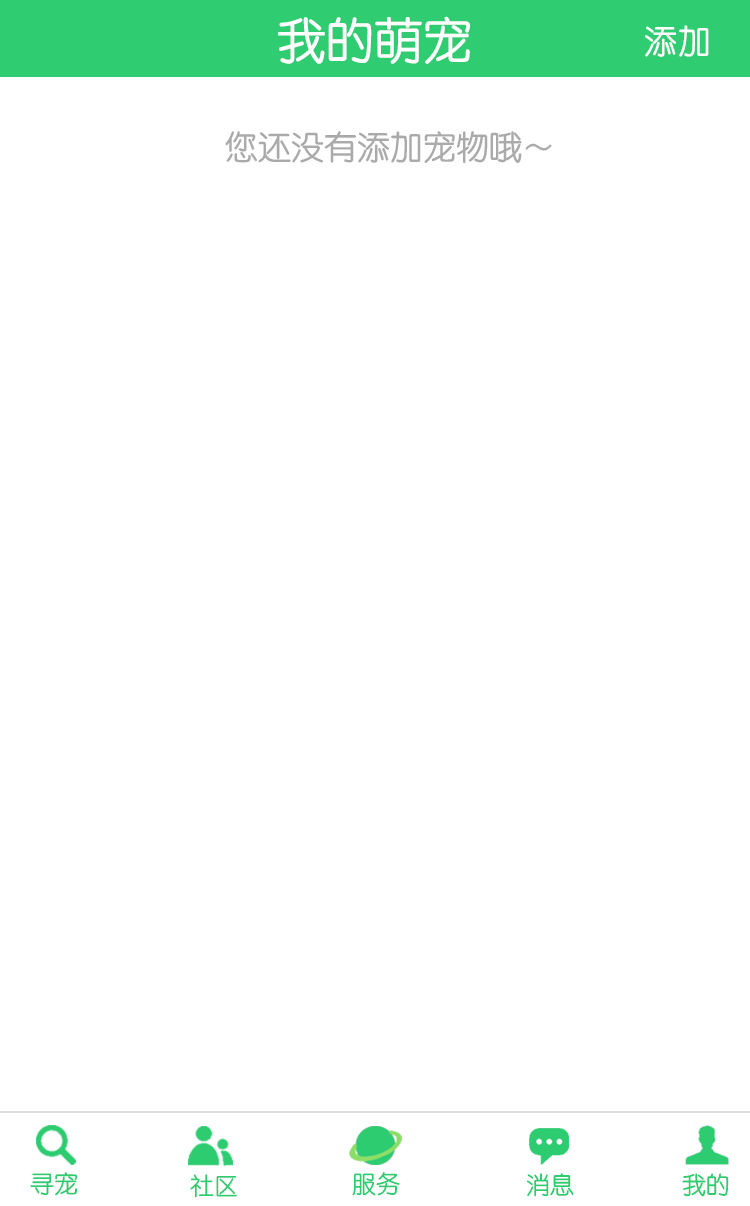
<style>
.page{position:relative;width:750px;height:1206px;background:#ffffff}
.page>*{position:absolute;margin:0}
.t1{font:48.7px "STYuanti-SC-Regular";color:#ffffff}
.t2{font:33px "STYuanti-SC-Regular";color:#ffffff}
.t3{font:33px "STYuanti-SC-Regular";color:#aaaaaa}
.t4{font:24px "STYuanti-SC-Regular";color:#2ecc71}
.t5{font:24px "STYuanti-SC-Regular"}
</style>
<div class="page">
<p class="t1" style="left:278px;top:16px;width:192px;height:48px">我的萌宠</p>
<p class="t2" style="left:645px;top:25px;width:64px;height:32px">添加</p>
<p class="t3" style="left:225px;top:131px;width:327px;height:32px">您还没有添加宠物哦～</p>
<p class="t4" style="left:30px;top:1172px;width:48px;height:24px">寻宠</p>
<p class="t4" style="left:190px;top:1174px;width:47px;height:24px">社区</p>
<p class="t5" style="left:352px;top:1173px;width:48px;height:24px">服务</p>
<p class="t4" style="left:352px;top:1172px;width:48px;height:24px">服务</p>
<p class="t5" style="left:526px;top:1173px;width:47px;height:24px">消息</p>
<p class="t4" style="left:527px;top:1173px;width:47px;height:24px">消息</p>
<p class="t4" style="left:682px;top:1173px;width:47px;height:24px">我的</p>
<p class="t4" style="left:682px;top:1173px;width:47px;height:24px">我的</p>
</div>
